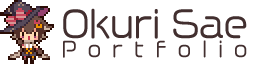
<style>
.page{position:relative;width:258px;height:64px;background:#ffffff}
.page>*{position:absolute;margin:0}
.t1{font:35.5px/32.5px "VDL-MegaMaru-Regular";color:#422f2f;scale:0.95 1}
.t2{font:20.2px/32.5px "VDL-MegaMaru-Regular";letter-spacing:0.59em;color:#422f2f;scale:0.95 1}
</style>
<div class="page">
<p class="t1" style="left:63px;top:8px;width:184px;height:50px">Okuri Sae<br><span class="t2">Portfolio</span></p>
</div>
